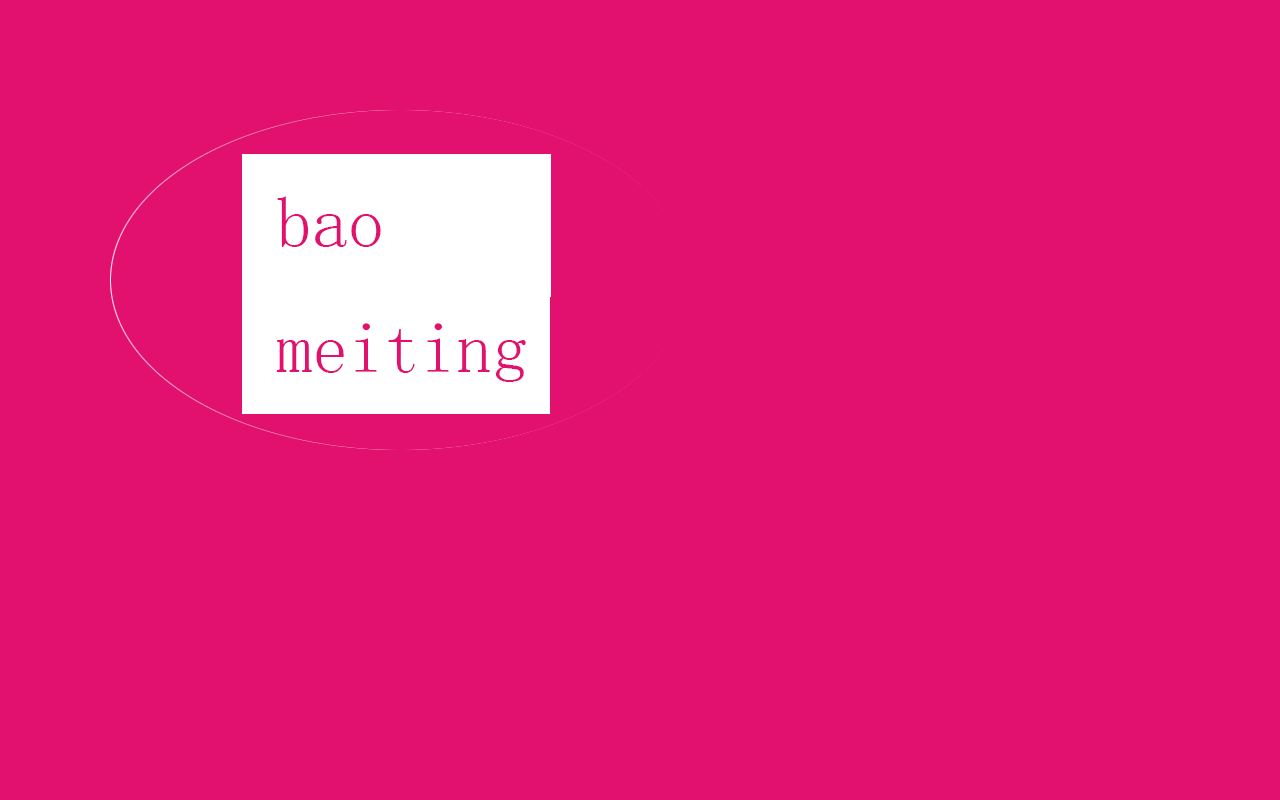
<style>
.page{position:relative;width:1280px;height:800px;background:#e2106e}
.page>*{position:absolute;margin:0}
.t1{font:72px "SimSun";color:#e2106e}
</style>
<div class="page">
<p class="t1" style="left:276px;top:196px;width:250px;height:186px">bao<br>meiting</p>
</div>
